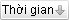
<style>
.page{position:relative;width:69px;height:20px;background:#ffffff}
.page>*{position:absolute;margin:0}
.t1{font:12px "ArialMT";color:#000000}
</style>
<div class="page">
<p class="t1" style="left:2px;top:4px;width:51px;height:12px">Thời gian</p>
</div>
